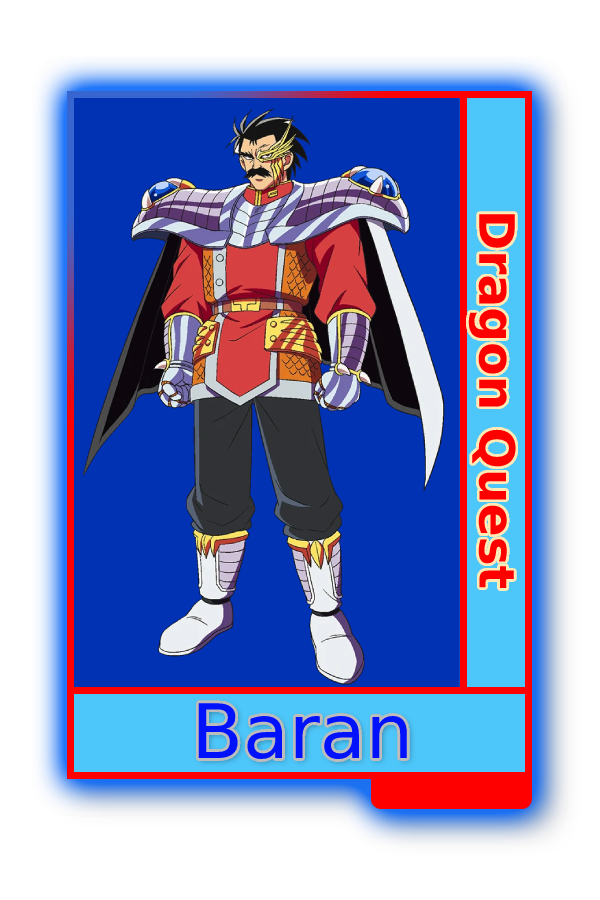
<style>
.page{position:relative;width:600px;height:900px;background:#0032b3}
.page>*{position:absolute;margin:0}
.t1{font:48.8px "MADETOMMY-Bold";color:#ff0000}
.t2{font:75px "CoolveticaRg-Regular";color:#0011fd}
</style>
<div class="page">
<p class="t1" style="left:468px;top:214px;width:48px;height:374px;rotate:90deg">Dragon Quest</p>
<p class="t2" style="left:198px;top:703px;width:209px;height:57px">Baran</p>
</div>
